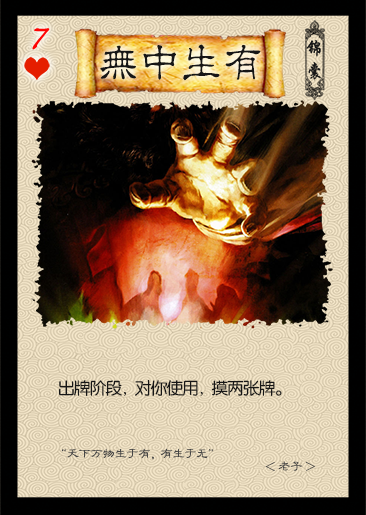
<style>
.page{position:relative;width:366px;height:515px}
.page>*{position:absolute;margin:0}
.t1{font:39.2px "Jxixinkai";letter-spacing:0.22em;color:#fe0404;font-weight:bold;font-style:italic}
.t2{font:41.7px "¾­µä·±½ÇÁ¥ Regular";color:#161616}
.t3{font:16.7px "FZY3JW--GB1-0";letter-spacing:-0.035em;color:#161616}
.t4{font:12.5px/12.5px "FZLBJW--GB1-0";letter-spacing:-0.02em;color:#464646}
.t5{font:12.5px/12.5px "FZLBJW--GB1-0";color:#464646}
</style>
<div class="page">
<p class="t1" style="left:32px;top:28px;width:18px;height:22px">7</p>
<p class="t2" style="left:100px;top:44px;width:161px;height:37px">无中生有</p>
<p class="t3" style="left:58px;top:379px;width:224px;height:17px">出牌阶段，对你使用，摸两张牌。</p>
<p class="t4" style="left:61px;top:448px;width:255px;height:23px">“天下万物生于有，有生于无”<br><span class="t5">                                                                   &lt; 老子 &gt;</span></p>
</div>
